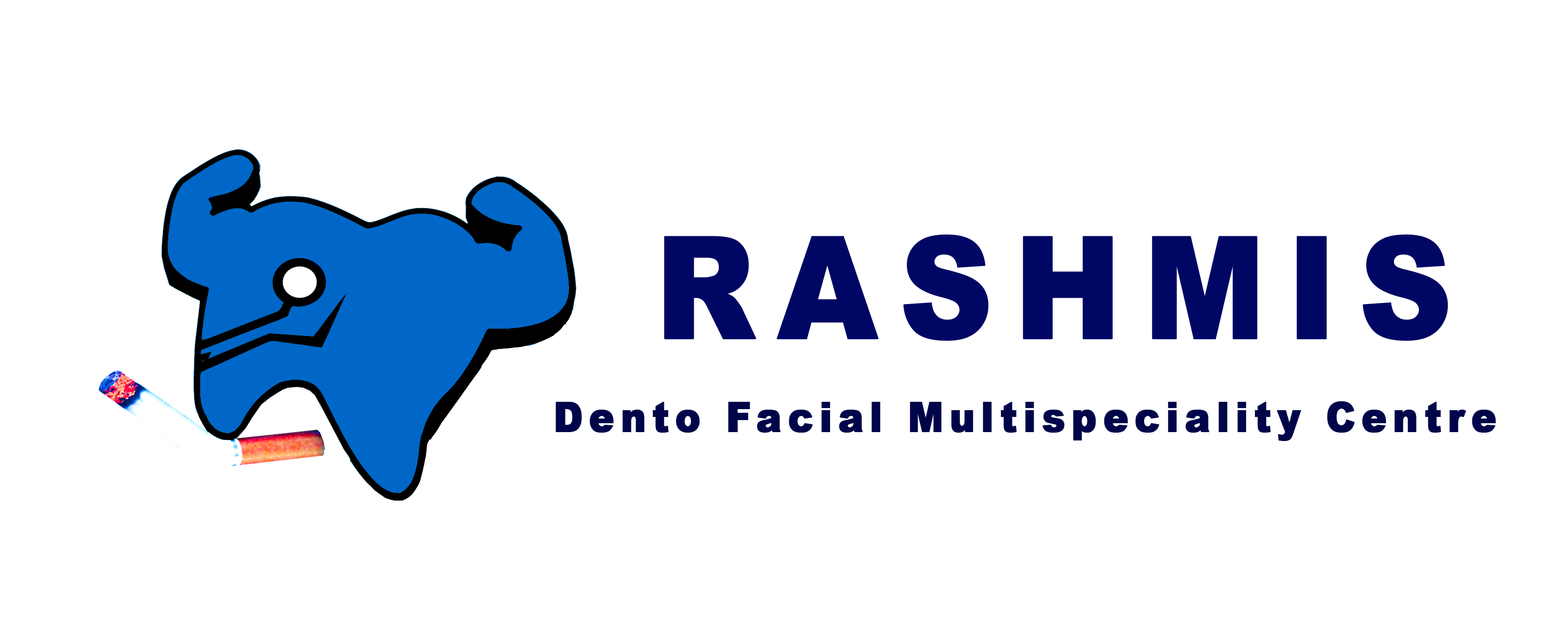
<style>
.page{position:relative;width:1568px;height:627px;background:#ffffff}
.page>*{position:absolute;margin:0}
.t1{font:142px "Arial-Black";letter-spacing:0.14em;color:#000663;font-weight:bold;scale:0.91 1}
.t2{font:41.6px "Arial-Black";letter-spacing:0.14em;color:#00054a;font-weight:bold;scale:0.91 1}
</style>
<div class="page">
<p class="t1" style="left:664px;top:234px;width:784px;height:107px">RASHMIS</p>
<p class="t2" style="left:556px;top:401px;width:940px;height:40px">Dento Facial Multispeciality Centre</p>
</div>
